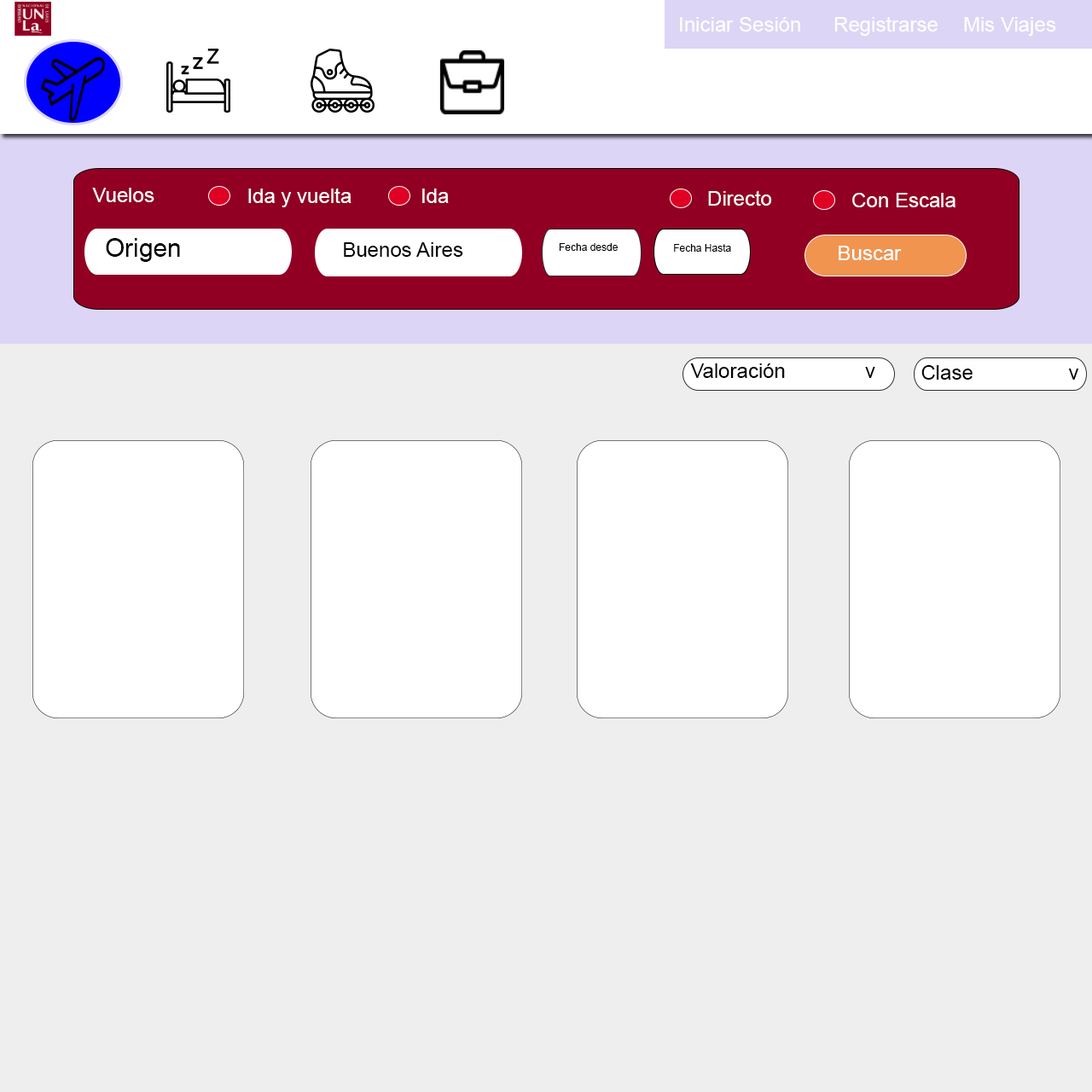
<style>
.page{position:relative;width:1092px;height:1092px;background:#eeeeee}
.page>*{position:absolute;margin:0}
.t1{font:20.5px "ArialMT";color:#ffffff}
.t2{font:25.6px "ArialMT";color:#000000}
.t3{font:20.5px "ArialMT";color:#000000}
.t4{font:10.2px "ArialMT";color:#000000}
</style>
<div class="page">
<p class="t1" style="left:680px;top:17px;width:120px;height:15px">Iniciar Sesión</p>
<p class="t1" style="left:834px;top:16px;width:104px;height:20px">Registrarse</p>
<p class="t1" style="left:964px;top:17px;width:92px;height:19px">Mis Viajes</p>
<p class="t1" style="left:92px;top:188px;width:62px;height:14px">Vuelos</p>
<p class="t1" style="left:248px;top:188px;width:103px;height:19px">Ida y vuelta</p>
<p class="t1" style="left:422px;top:189px;width:27px;height:14px">Ida</p>
<p class="t1" style="left:708px;top:190px;width:64px;height:16px">Directo</p>
<p class="t1" style="left:852px;top:193px;width:103px;height:14px">Con Escala</p>
<p class="t2" style="left:106px;top:238px;width:74px;height:24px">Origen</p>
<p class="t3" style="left:344px;top:242px;width:119px;height:15px">Buenos Aires</p>
<p class="t4" style="left:559px;top:243px;width:59px;height:8px">Fecha desde</p>
<p class="t4" style="left:674px;top:244px;width:57px;height:8px">Fecha Hasta</p>
<p class="t1" style="left:839px;top:246px;width:63px;height:14px">Buscar</p>
<p class="t3" style="left:690px;top:363px;width:185px;height:15px">Valoración              v</p>
<p class="t3" style="left:921px;top:365px;width:52px;height:15px">Clase</p>
<p class="t3" style="left:1068px;top:369px;width:11px;height:11px">v</p>
</div>
